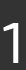
<style>
.page{position:relative;width:26px;height:70px;background:#333333}
.page>*{position:absolute;margin:0}
.t1{font:57px "Exo2-Regular";color:#ffffff}
</style>
<div class="page">
<p class="t1" style="left:3px;top:23px;width:16px;height:40px">1</p>
</div>
